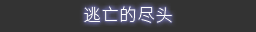
<style>
.page{position:relative;width:256px;height:32px;background:#333333}
.page>*{position:absolute;margin:0}
.t1{font:17px "NotoSansSC-Thin";letter-spacing:0.06em;color:#ffffff}
</style>
<div class="page">
<p class="t1" style="left:84px;top:6px;width:88px;height:17px">逃亡的尽头</p>
</div>
